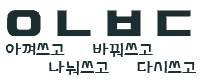
<style>
.page{position:relative;width:200px;height:82px;background:#ffffff}
.page>*{position:absolute;margin:0}
.t1{font:16.7px "THEAlien";color:#1d2e32}
</style>
<div class="page">
<p class="t1" style="left:6px;top:43px;width:147px;height:14px">아껴쓰고       바꿔쓰고</p>
<p class="t1" style="left:49px;top:61px;width:147px;height:14px">나눠쓰고       다시쓰고</p>
</div>
